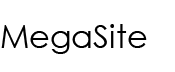
<style>
.page{position:relative;width:175px;height:72px;background:#ffffff}
.page>*{position:absolute;margin:0}
.t1{font:32px "CenturyGothic";color:#000000}
</style>
<div class="page">
<p class="t1" style="left:1px;top:24px;width:146px;height:30px">MegaSite</p>
</div>
